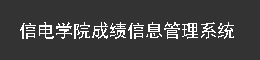
<style>
.page{position:relative;width:260px;height:60px;background:#333333}
.page>*{position:absolute;margin:0}
.t1{font:18px "SimHei";color:#ffffff}
</style>
<div class="page">
<p class="t1" style="left:20px;top:22px;width:214px;height:17px">信电学院成绩信息管理系统</p>
</div>
